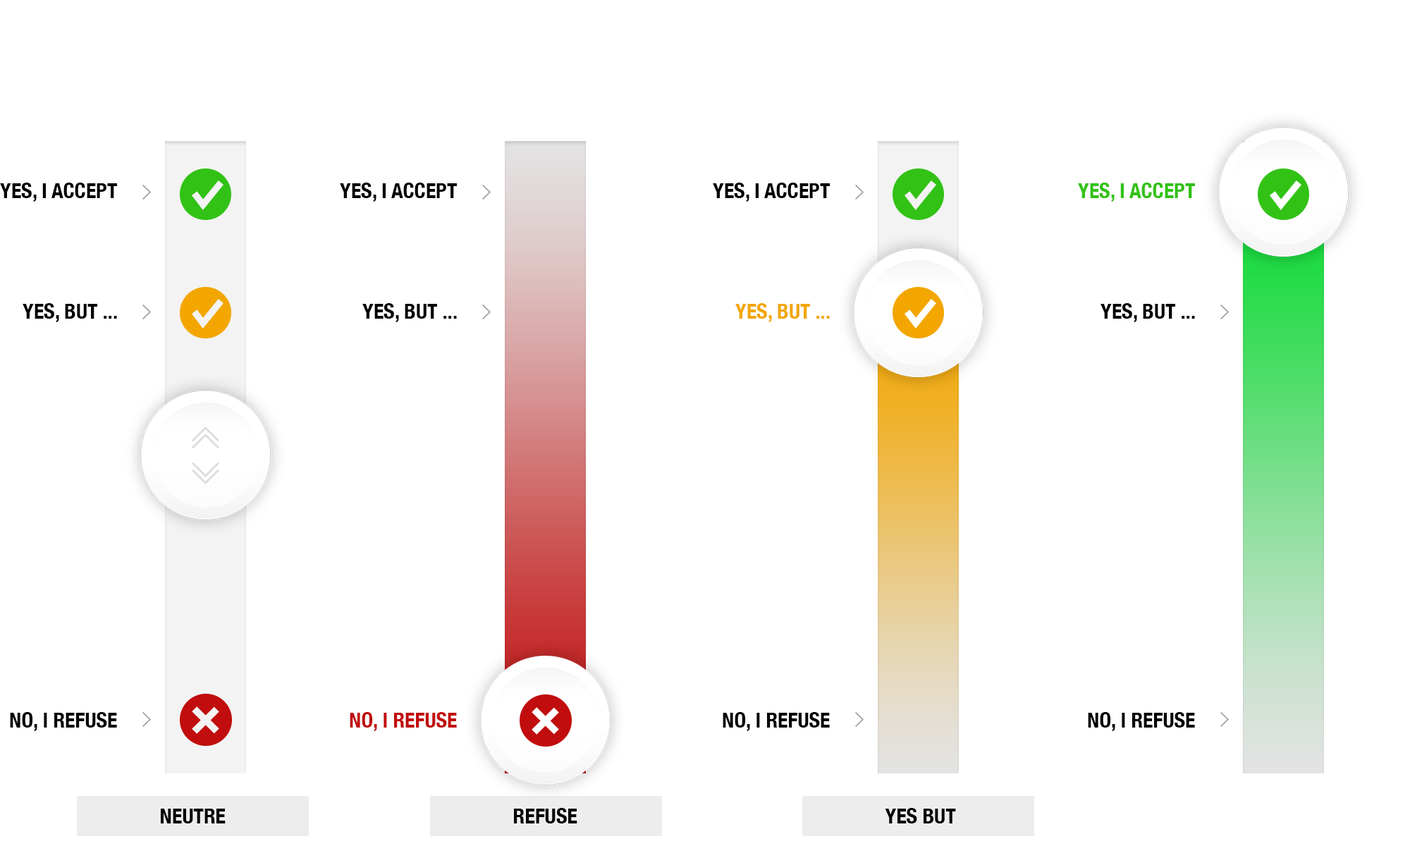
<style>
.page{position:relative;width:1410px;height:846px;background:#ffffff}
.page>*{position:absolute;margin:0}
.t1{font:21.1px "HelveticaNeue-CondensedBold";color:#000000;text-transform:uppercase}
.t2{font:21.1px "HelveticaNeue-CondensedBold";color:#32c216;text-transform:uppercase}
.t3{font:21.1px "HelveticaNeue-CondensedBold";color:#f3a600;text-transform:uppercase}
.t4{font:21.1px "HelveticaNeue-CondensedBold";color:#000000}
.t5{font:21.1px "HelveticaNeue-CondensedBold";color:#c10d0d}
</style>
<div class="page">
<p class="t1" style="left:0px;top:183px;width:117px;height:19px">Yes, i accept</p>
<p class="t1" style="left:340px;top:183px;width:117px;height:19px">Yes, i accept</p>
<p class="t1" style="left:713px;top:183px;width:117px;height:19px">Yes, i accept</p>
<p class="t2" style="left:1078px;top:183px;width:117px;height:19px">Yes, i accept</p>
<p class="t1" style="left:23px;top:303px;width:94px;height:19px">Yes, but ...</p>
<p class="t1" style="left:362px;top:303px;width:95px;height:19px">Yes, but ...</p>
<p class="t3" style="left:735px;top:303px;width:95px;height:19px">Yes, but ...</p>
<p class="t1" style="left:1100px;top:303px;width:95px;height:19px">Yes, but ...</p>
<p class="t4" style="left:10px;top:712px;width:107px;height:19px">NO, I REFUSE</p>
<p class="t5" style="left:350px;top:712px;width:107px;height:19px">NO, I REFUSE</p>
<p class="t4" style="left:722px;top:712px;width:108px;height:19px">NO, I REFUSE</p>
<p class="t4" style="left:1088px;top:712px;width:107px;height:19px">NO, I REFUSE</p>
<p class="t1" style="left:161px;top:808px;width:65px;height:15px">NEUTRE</p>
<p class="t1" style="left:514px;top:808px;width:63px;height:15px">Refuse</p>
<p class="t1" style="left:885px;top:808px;width:71px;height:15px">Yes But</p>
</div>
